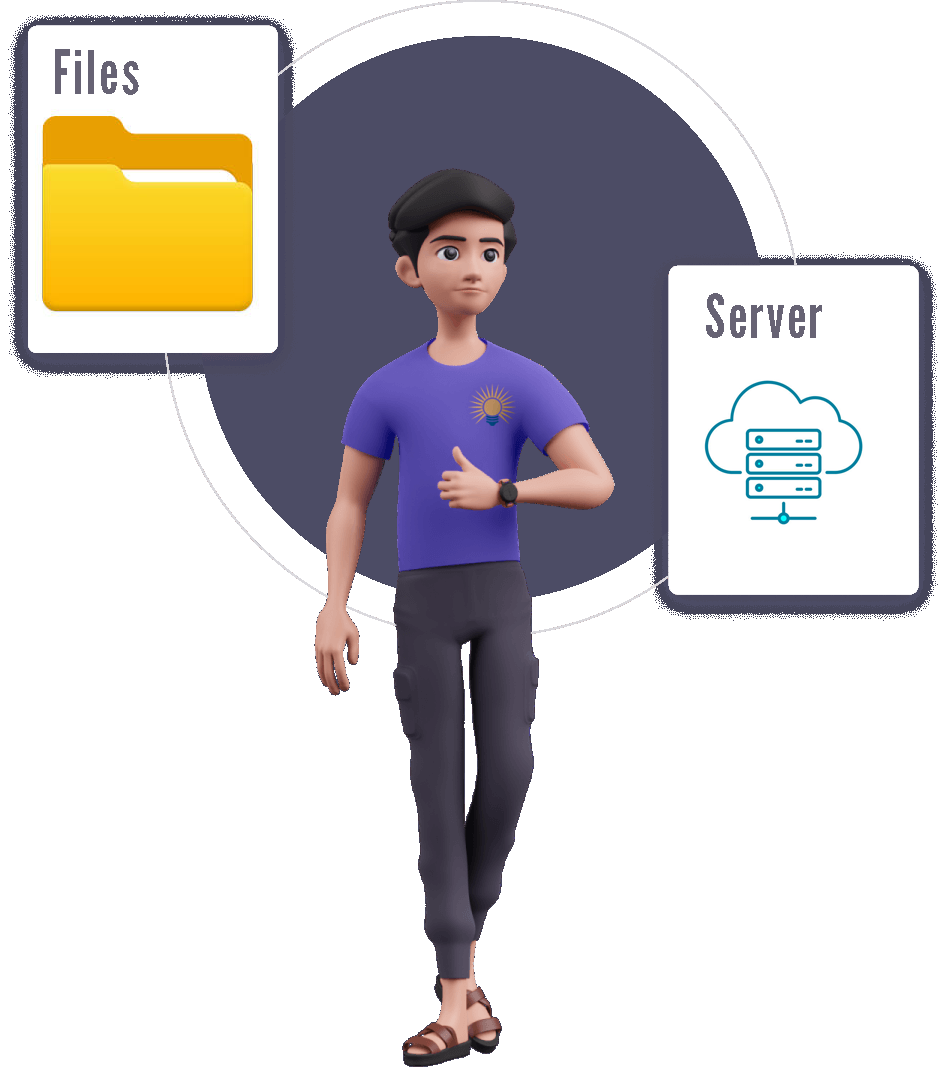
<style>
.page{position:relative;width:945px;height:1069px;background:#ffffff}
.page>*{position:absolute;margin:0}
.t1{font:60px "LeagueGothic-Regular";letter-spacing:0.04em;color:#676374}
</style>
<div class="page">
<p class="t1" style="left:55px;top:49px;width:84px;height:46px">Files</p>
<p class="t1" style="left:706px;top:293px;width:116px;height:45px">Server</p>
</div>
